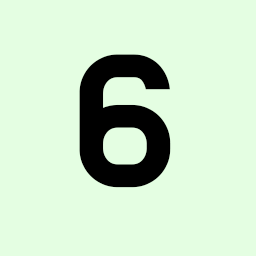
<style>
.page{position:relative;width:256px;height:256px;background:#e4fee2}
.page>*{position:absolute;margin:0}
.t1{font:153.3px "BMDoHyeon";color:#000000}
</style>
<div class="page">
<p class="t1" style="left:79px;top:54px;width:92px;height:134px">6</p>
</div>
